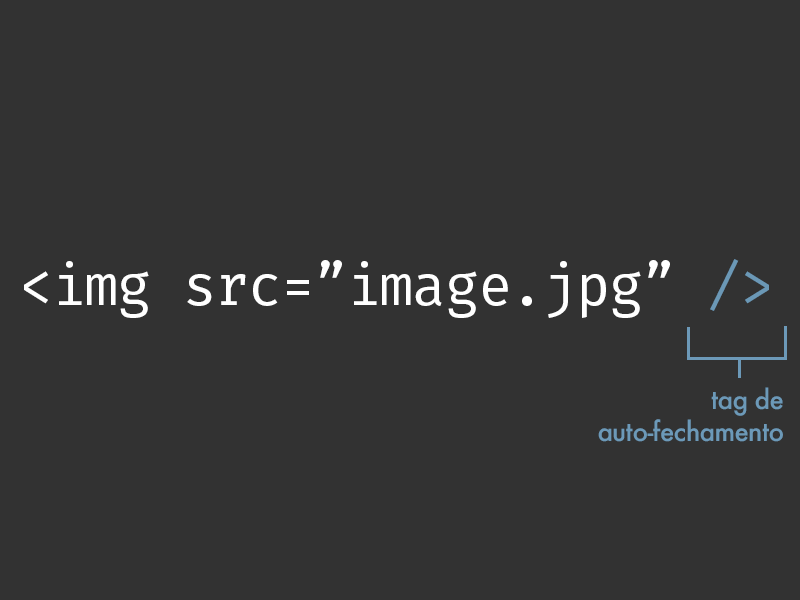
<style>
.page{position:relative;width:800px;height:600px;background:#323232}
.page>*{position:absolute;margin:0}
.t1{font:57px "FiraCode-Regular";letter-spacing:-0.025em;color:#ffffff}
.t2{font:57px "FiraCode-Regular";letter-spacing:-0.025em;color:#6b98b6}
.t3{font:26px/32px "Futura-Medium";letter-spacing:-0.025em;color:#6c99b8}
</style>
<div class="page">
<p class="t1" style="left:24px;top:259px;width:745px;height:59px">&lt;img src=”image.jpg” <span class="t2">/&gt;</span></p>
<p class="t3" style="left:598px;top:387px;width:185px;height:55px;text-align:right">tag de<br>auto-fechamento</p>
</div>
